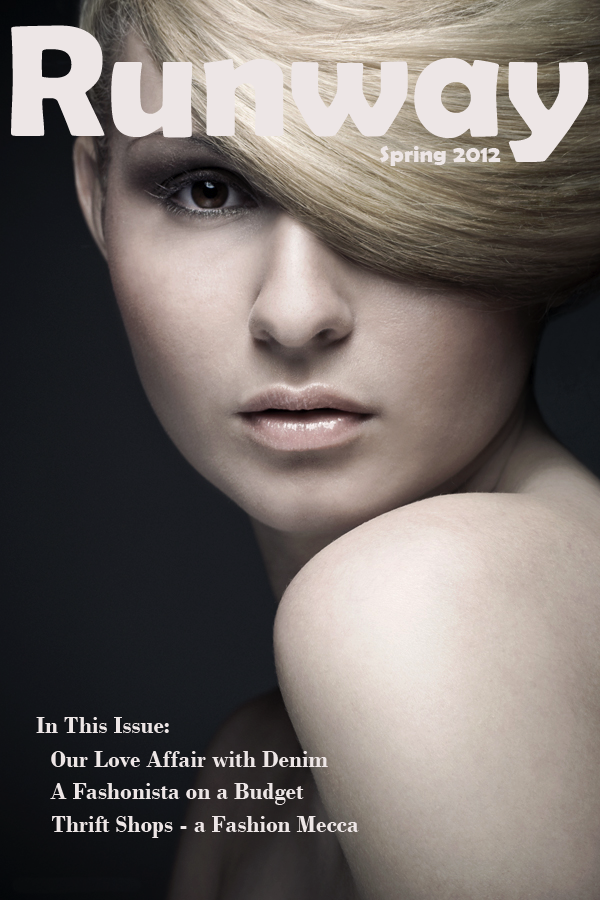
<style>
.page{position:relative;width:600px;height:900px}
.page>*{position:absolute;margin:0}
.t1{font:160px "BerlinSansFBDemi-Bold";color:#ede6e6}
.t2{font:24px "BerlinSansFBDemi-Bold";color:#ede6e6}
.t3{font:24px "BodoniMT-Bold";color:#ede6e6}
</style>
<div class="page">
<p class="t1" style="left:11px;top:25px;width:578px;height:137px">Runway</p>
<p class="t2" style="left:380px;top:146px;width:121px;height:20px">Spring 2012</p>
<p class="t3" style="left:36px;top:717px;width:133px;height:16px">In This Issue:</p>
<p class="t3" style="left:51px;top:751px;width:277px;height:16px">Our Love Affair with Denim</p>
<p class="t3" style="left:50px;top:783px;width:254px;height:22px">A Fashonista on a Budget</p>
<p class="t3" style="left:52px;top:816px;width:307px;height:22px">Thrift Shops - a Fashion Mecca</p>
</div>
